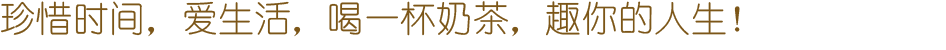
<style>
.page{position:relative;width:946px;height:50px;background:#ffffff}
.page>*{position:absolute;margin:0}
.t1{font:36px "YouYuan";letter-spacing:0.01em;color:#7c5618}
</style>
<div class="page">
<p class="t1" style="left:1px;top:1px;width:739px;height:36px">珍惜时间，爱生活，喝一杯奶茶，趣你的人生！</p>
</div>
